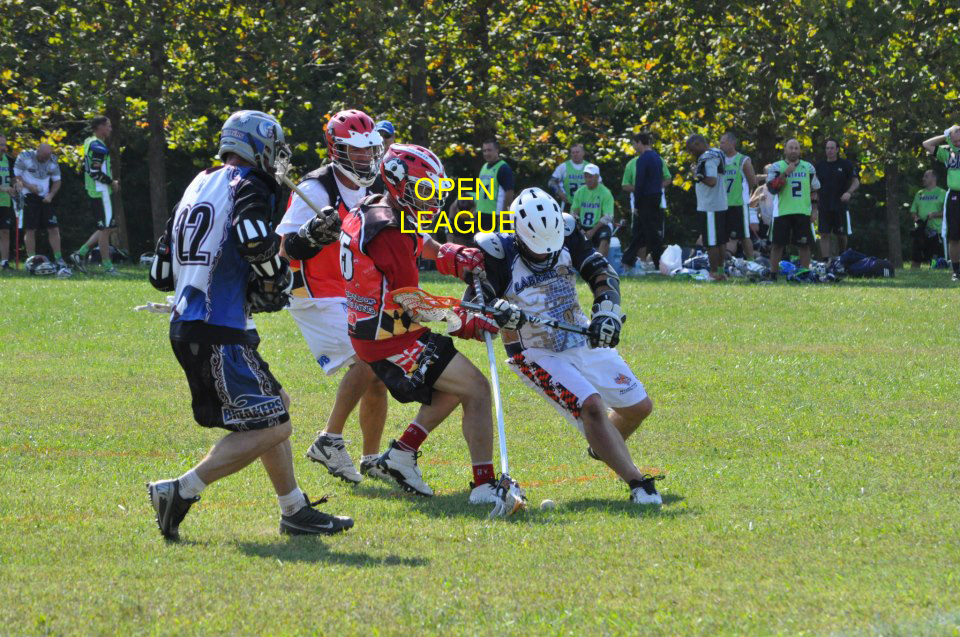
<style>
.page{position:relative;width:960px;height:637px}
.page>*{position:absolute;margin:0}
.t1{font:30px "HelveticaNeue";color:#ffff00}
</style>
<div class="page">
<p class="t1" style="left:414px;top:177px;width:80px;height:24px">OPEN</p>
<p class="t1" style="left:401px;top:210px;width:114px;height:24px">LEAGUE</p>
</div>
